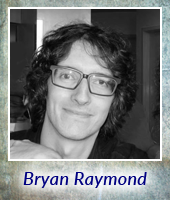
<style>
.page{position:relative;width:170px;height:200px}
.page>*{position:absolute;margin:0}
.t1{font:18px "Lato-MediumItalic";letter-spacing:0.018em;color:#000080}
</style>
<div class="page">
<p class="t1" style="left:23px;top:172px;width:124px;height:16px">Bryan Raymond</p>
</div>
